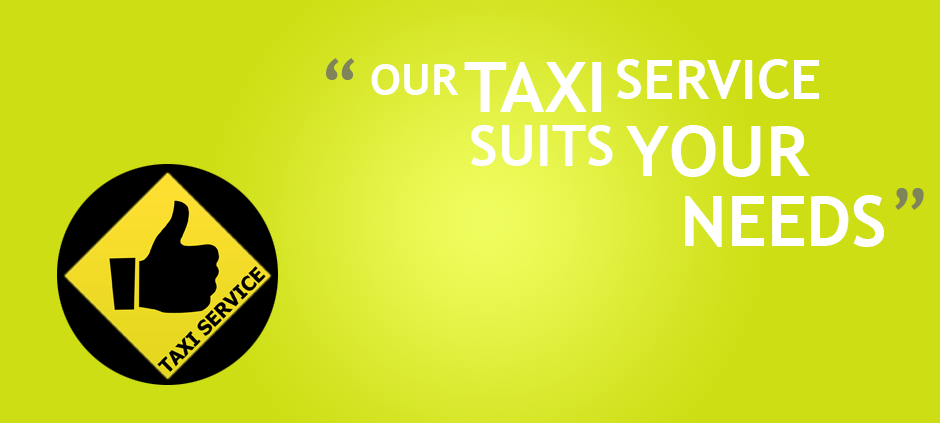
<style>
.page{position:relative;width:940px;height:423px;background:#cdde14}
.page>*{position:absolute;margin:0}
.t1{font:70px "TrebuchetMS-Bold";color:#808459}
.t2{font:44.4px "TrebuchetMS-Bold";color:#ffffff}
.t3{font:70px "TrebuchetMS-Bold";color:#ffffff}
.t4{font:55px "TrebuchetMS-Bold";color:#ffffff}
.t5{font:56.8px "TrebuchetMS-Bold";color:#ffffff}
</style>
<div class="page">
<p class="t1" style="left:326px;top:58px;width:29px;height:22px">“</p>
<p class="t2" style="left:371px;top:64px;width:88px;height:31px">OUR</p>
<p class="t3" style="left:464px;top:62px;width:138px;height:50px">TAXI</p>
<p class="t4" style="left:617px;top:59px;width:202px;height:40px">SERVICE</p>
<p class="t5" style="left:471px;top:125px;width:142px;height:41px">SUITS</p>
<p class="t3" style="left:626px;top:125px;width:184px;height:52px">YOUR</p>
<p class="t3" style="left:685px;top:195px;width:199px;height:52px">NEEDS</p>
<p class="t1" style="left:895px;top:188px;width:29px;height:22px">”</p>
</div>
